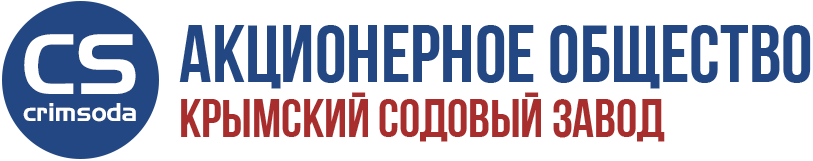
<style>
.page{position:relative;width:813px;height:161px;background:#ffffff}
.page>*{position:absolute;margin:0}
.t1{font:80.5px "BebasNeueCyrillic";color:#234783}
.t2{font:83.3px "HandelGothic";color:#ffffff}
.t3{font:53.7px "BebasNeueCyrillic";color:#a82e2e}
.t4{font:25px "HandelGothic";color:#ffffff}
</style>
<div class="page">
<p class="t1" style="left:179px;top:25px;width:632px;height:64px">АКЦИОНЕРНОЕ ОБЩЕСТВО</p>
<p class="t2" style="left:24px;top:34px;width:112px;height:60px">CS</p>
<p class="t3" style="left:181px;top:92px;width:484px;height:50px">КРЫМСКИЙ СОДОВЫЙ ЗАВОД</p>
<p class="t4" style="left:23px;top:103px;width:113px;height:19px">crimsoda</p>
</div>
